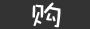
<style>
.page{position:relative;width:90px;height:29px;background:#333333}
.page>*{position:absolute;margin:0}
.t1{font:36px "DFWaWaSC-W5";color:#ffffff}
</style>
<div class="page">
<p class="t1" style="left:32px;top:2px;width:29px;height:26px">购</p>
</div>
